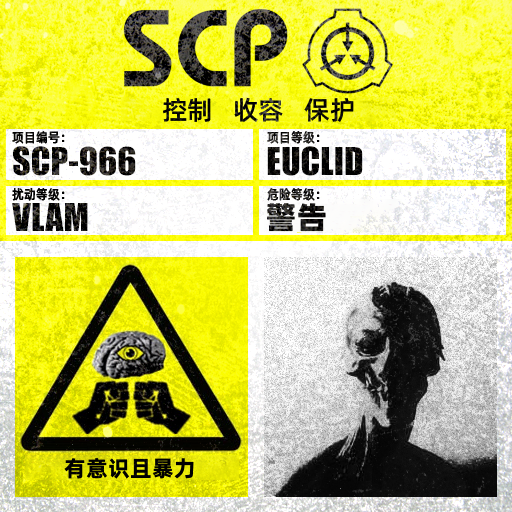
<style>
.page{position:relative;width:512px;height:512px}
.page>*{position:absolute;margin:0}
.t1{font:26px "AlibabaPuHuiTiM";color:#000000}
.t2{font:13.3px "AlibabaPuHuiTiM";letter-spacing:0.02em;color:#000000;scale:0.9 1}
.t3{font:13.3px "AlibabaPuHuiTiM";letter-spacing:0.02em;scale:0.9 1}
.t4{font:30.3px "AlibabaPuHuiTiH";letter-spacing:0.02em}
.t5{font:22px "AlibabaPuHuiTiB";letter-spacing:0.02em;color:#000000}
</style>
<div class="page">
<p class="t1" style="left:163px;top:97px;width:191px;height:26px">控制   收容   保护</p>
<p class="t2" style="left:12px;top:131px;width:53px;height:13px">项目编号：</p>
<p class="t3" style="left:267px;top:131px;width:53px;height:13px">项目等级：</p>
<p class="t2" style="left:12px;top:188px;width:53px;height:13px">扰动等级：</p>
<p class="t3" style="left:267px;top:188px;width:53px;height:13px">危险等级：</p>
<p class="t4" style="left:267px;top:203px;width:59px;height:29px">警告</p>
<p class="t5" style="left:64px;top:458px;width:130px;height:21px">有意识且暴力</p>
</div>
